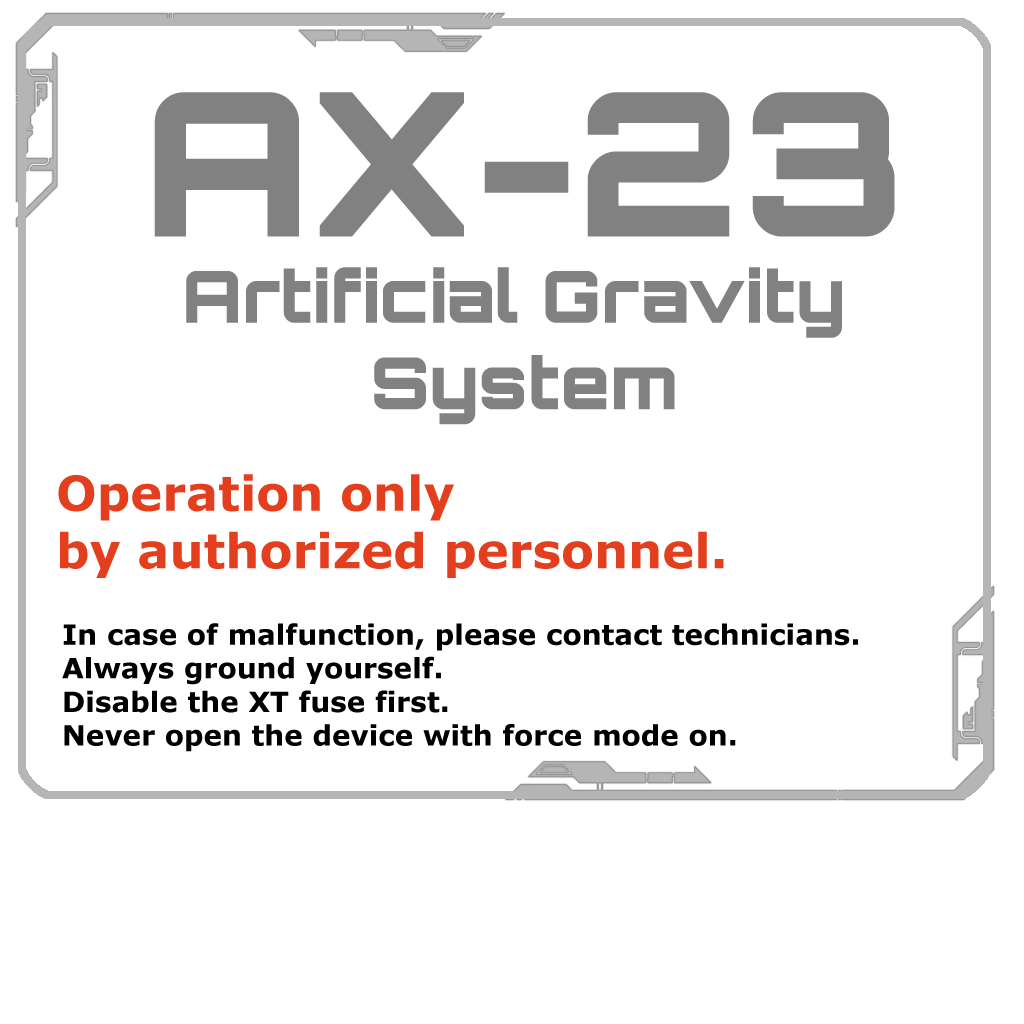
<style>
.page{position:relative;width:1024px;height:1024px;background:#ffffff}
.page>*{position:absolute;margin:0}
.t1{font:72px "Orbitron-Black";color:#818181}
.t2{font:200px "Orbitron-Black";color:#818181}
.t3{font:48px "Verdana-Bold";color:#e33e1d}
.t4{font:28px "Verdana-Bold";color:#000000}
</style>
<div class="page">
<p class="t1" style="left:154px;top:92px;width:741px;height:333px;text-align:center"><span class="t2">AX-23<br></span>Artificial Gravity <br>System</p>
<p class="t3" style="left:58px;top:474px;width:666px;height:104px">Operation only <br>by authorized personnel.</p>
<p class="t4" style="left:62px;top:623px;width:796px;height:129px">In case of malfunction, please contact technicians. <br>Always ground yourself.<br>Disable the XT fuse first.<br>Never open the device with force mode on.</p>
</div>
